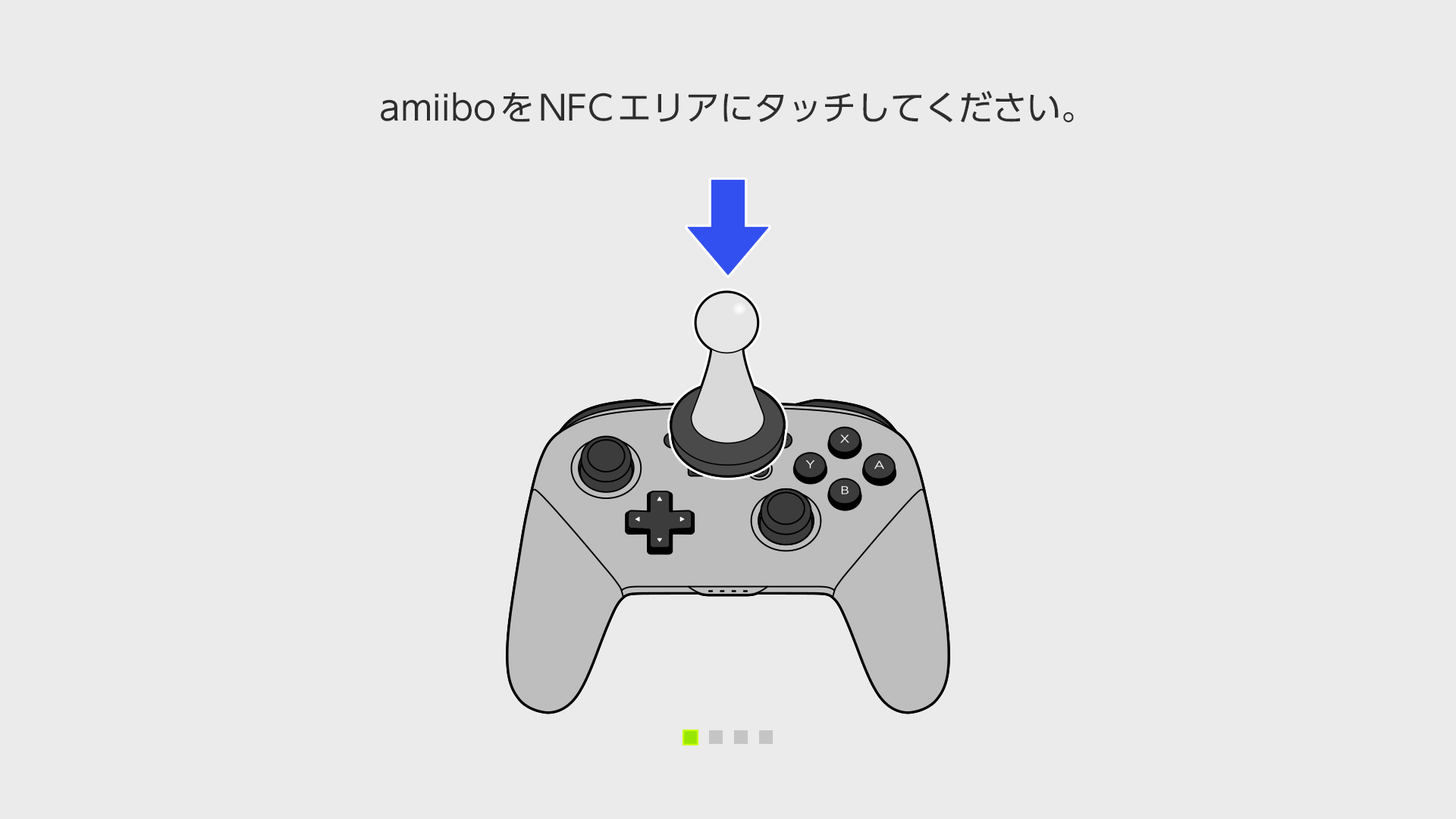
<style>
.page{position:relative;width:1456px;height:819px;background:#ebebeb}
.page>*{position:absolute;margin:0}
.t1{font:34.1px "nintendo_udsg-r_std_003";color:#2d2d2d}
</style>
<div class="page">
<p class="t1" style="left:381px;top:90px;width:693px;height:33px">amiiboをNFCエリアにタッチしてください。</p>
</div>
